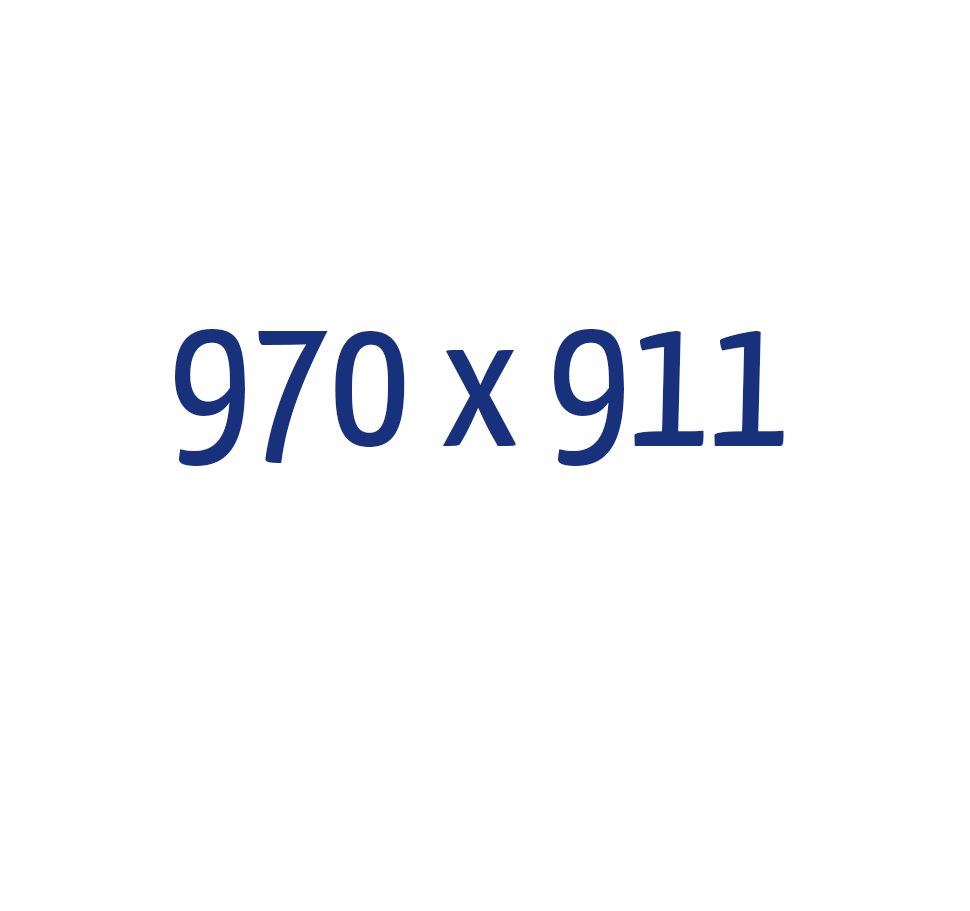
<style>
.page{position:relative;width:970px;height:911px;background:#ffffff}
.page>*{position:absolute;margin:0}
.t1{font:192.2px "YanoneKaffeesatz-Regular";color:#17317c}
</style>
<div class="page">
<p class="t1" style="left:175px;top:329px;width:609px;height:137px">970 x 911</p>
</div>
